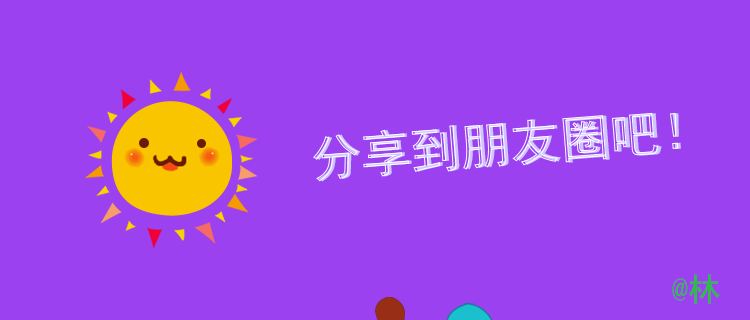
<style>
.page{position:relative;width:750px;height:320px;background:#9b41ef}
.page>*{position:absolute;margin:0}
.t1{font:50px "SimHei";color:#d7cfff}
.t2{font:32.4px "SimHei";color:#29c042}
</style>
<div class="page">
<p class="t1" style="left:315px;top:113px;width:366px;height:69px;rotate:-4deg">分享到朋友圈吧！</p>
<p class="t2" style="left:672px;top:274px;width:48px;height:30px">@林</p>
</div>
